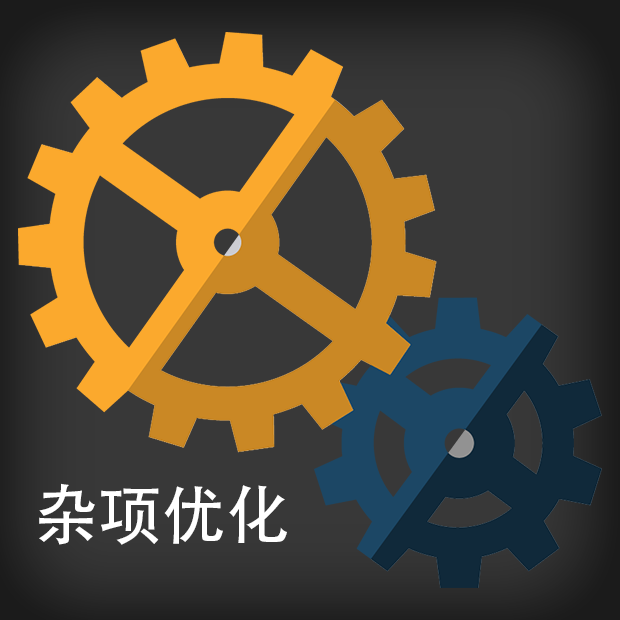
<style>
.page{position:relative;width:620px;height:620px;background:#383838}
.page>*{position:absolute;margin:0}
.t1{font:64px "AdobeHeitiStd-Regular";color:#ffffff}
</style>
<div class="page">
<p class="t1" style="left:39px;top:483px;width:248px;height:62px">杂项优化</p>
</div>
